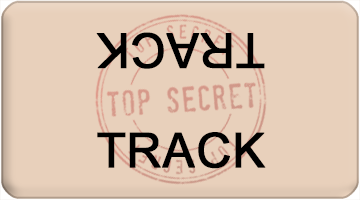
<style>
.page{position:relative;width:360px;height:200px;background:#e8d0bb}
.page>*{position:absolute;margin:0}
.t1{font:48px "ArialMT";color:#000000;font-weight:bold}
</style>
<div class="page">
<p class="t1" style="left:96px;top:32px;width:169px;height:37px;rotate:180deg">TRACK</p>
<p class="t1" style="left:97px;top:132px;width:169px;height:37px">TRACK</p>
</div>
